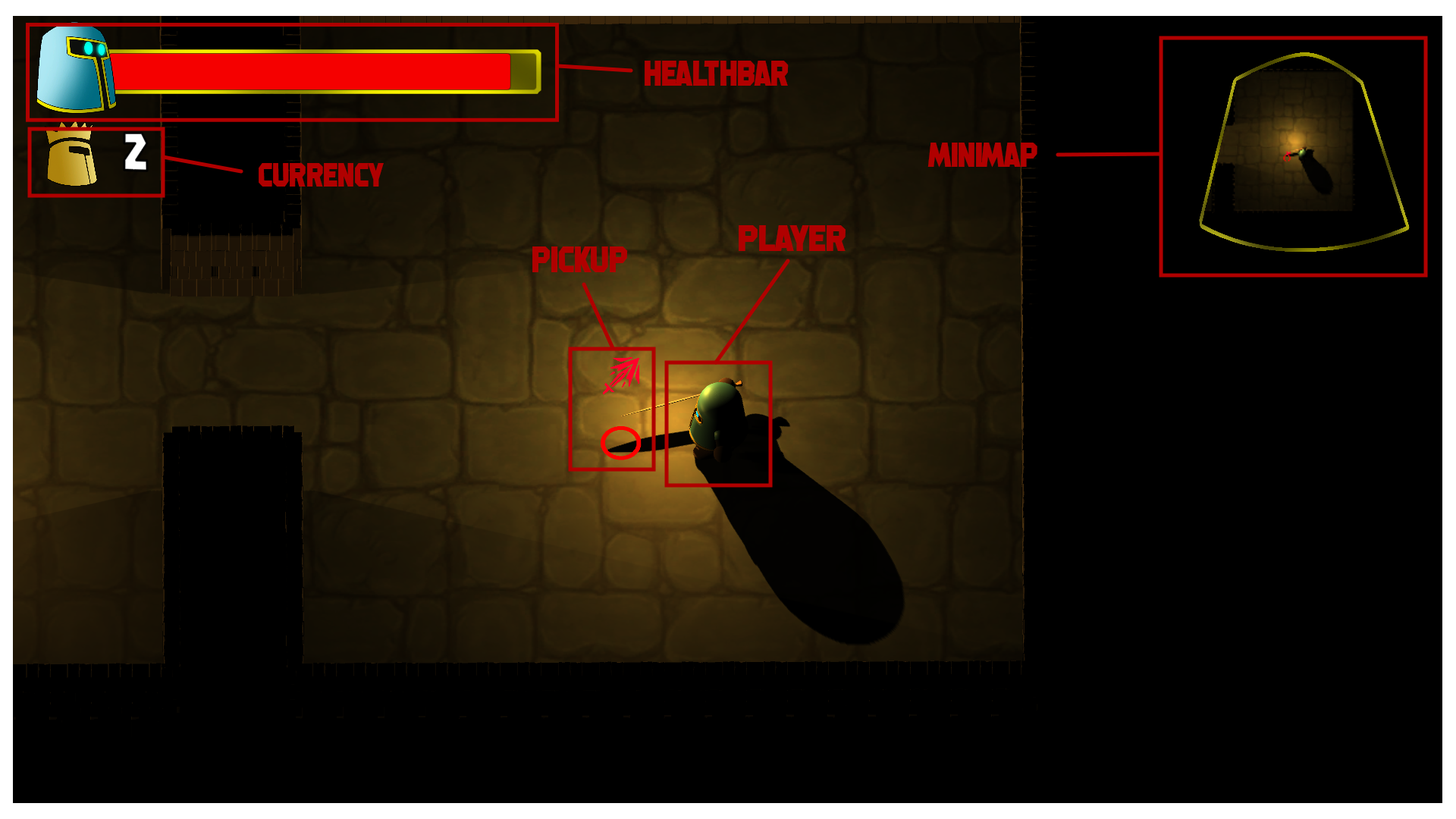
<style>
.page{position:relative;width:1456px;height:819px;background:#000000}
.page>*{position:absolute;margin:0}
.t1{font:35.3px "MachineGunk";color:#b00000}
.t2{font:34.7px "MachineGunk";color:#b00000}
.t3{font:33.2px "MachineGunk";color:#b00000}
.t4{font:36.5px "MachineGunk";color:#b00000;scale:1.11 1}
.t5{font:37px "MachineGunk";color:#b00000}
</style>
<div class="page">
<p class="t1" style="left:645px;top:61px;width:144px;height:25px">Healthbar</p>
<p class="t2" style="left:927px;top:143px;width:110px;height:25px">Minimap</p>
<p class="t3" style="left:259px;top:163px;width:125px;height:24px">Currency</p>
<p class="t4" style="left:739px;top:225px;width:107px;height:26px">Player</p>
<p class="t5" style="left:532px;top:246px;width:96px;height:26px">PickUP</p>
</div>
